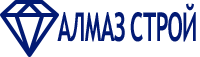
<style>
.page{position:relative;width:200px;height:57px;background:#ffffff}
.page>*{position:absolute;margin:0}
.t1{font:40px "TrebuchetMS-Bold";letter-spacing:-0.05em;color:#021a74;scale:0.55 1}
</style>
<div class="page">
<p class="t1" style="left:57px;top:3px;width:139px;height:39px">АЛМАЗ СТРОЙ</p>
</div>
